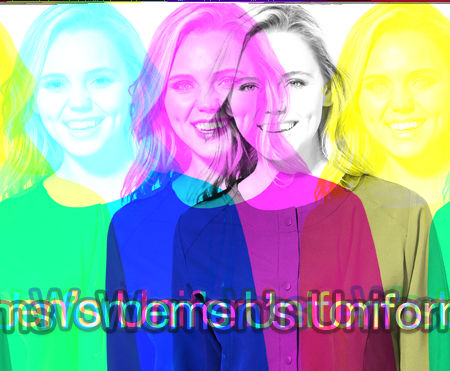
<style>
.page{position:relative;width:450px;height:371px}
.page>*{position:absolute;margin:0}
.t1{font:50px "HelveticaNeue";letter-spacing:-0.02em}
</style>
<div class="page">
<p class="t1" style="left:32px;top:289px;width:405px;height:37px">Women’s Uniforms</p>
</div>
